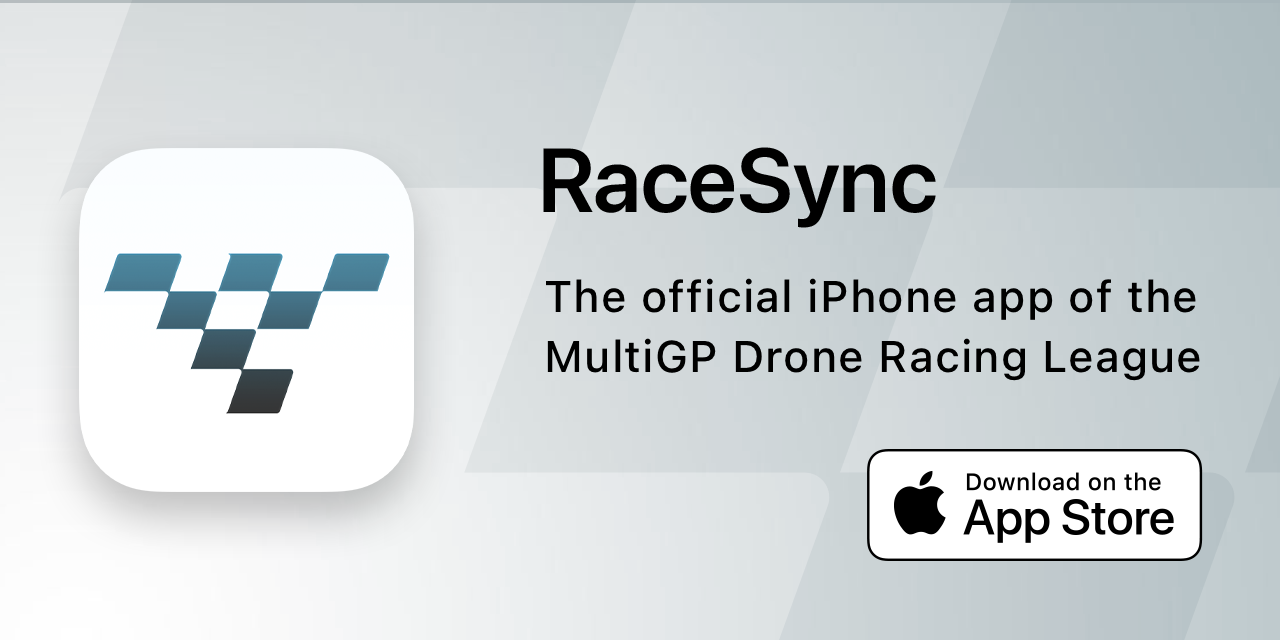
<style>
.page{position:relative;width:1280px;height:640px}
.page>*{position:absolute;margin:0}
.t1{font:90px "SFPro-Semibold";color:#000000}
.t2{font:44px/60px "SFProText-Medium";letter-spacing:0.025em;color:#000000}
</style>
<div class="page">
<p class="t1" style="left:543px;top:147px;width:393px;height:81px">RaceSync</p>
<p class="t2" style="left:546px;top:278px;width:654px;height:103px">The official iPhone app of the<br>MultiGP Drone Racing League</p>
</div>
